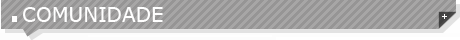
<style>
.page{position:relative;width:460px;height:40px;background:#969595}
.page>*{position:absolute;margin:0}
.t1{font:20px "Verdana";color:#ffffff}
</style>
<div class="page">
<p class="t1" style="left:23px;top:7px;width:140px;height:15px">COMUNIDADE</p>
</div>
